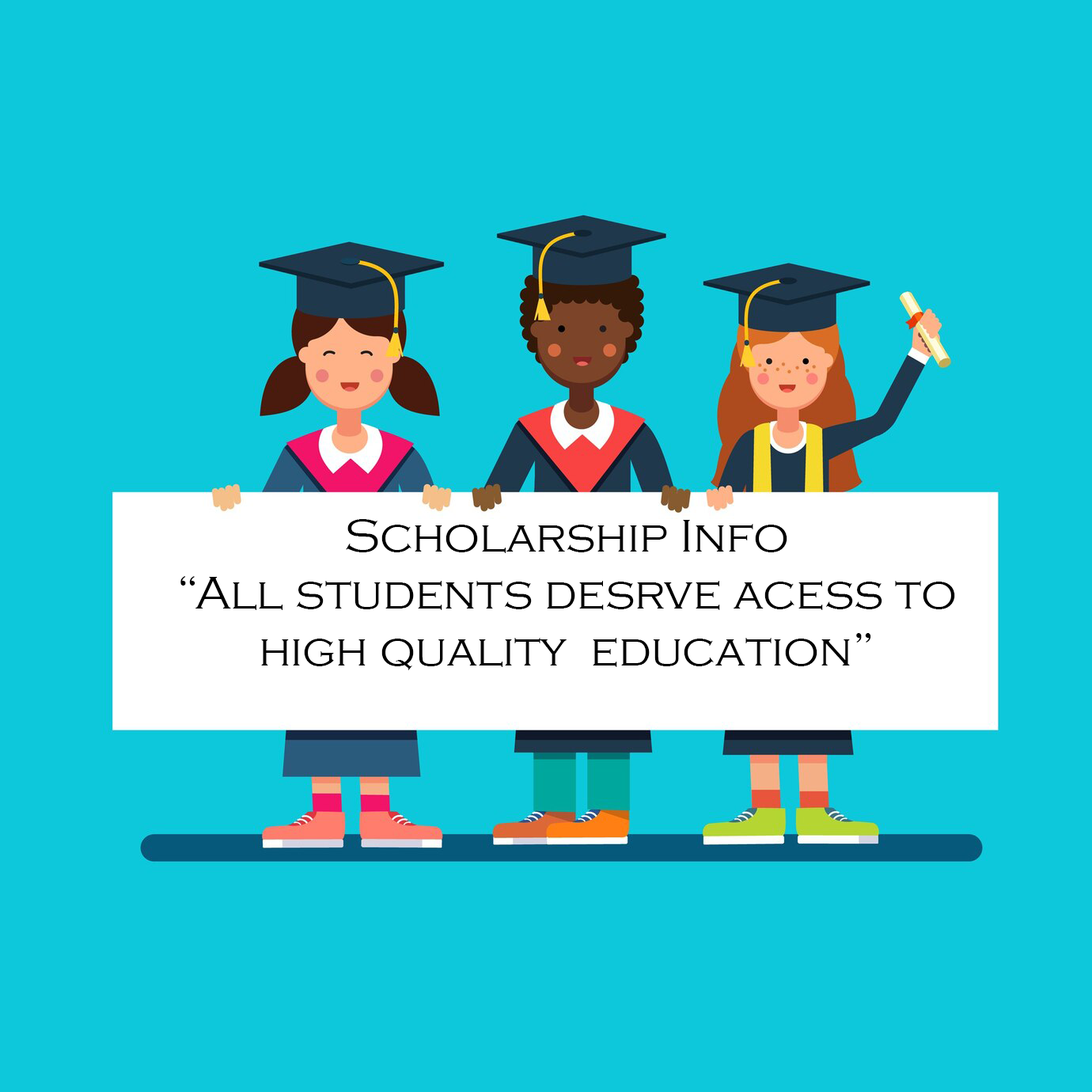
<style>
.page{position:relative;width:1092px;height:1092px;background:#0dc8db}
.page>*{position:absolute;margin:0}
.t1{font:47.5px "CopperplateGothic-Light";color:#000000}
</style>
<div class="page">
<p class="t1" style="left:180px;top:519px;width:775px;height:151px;text-align:center">Scholarship Info<br>“All students desrve acess to high quality  education”</p>
</div>
